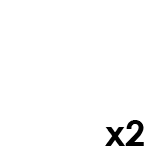
<style>
.page{position:relative;width:150px;height:150px;background:#ffffff}
.page>*{position:absolute;margin:0}
.t1{font:36px "CenturyGothic-Bold";color:#000000}
</style>
<div class="page">
<p class="t1" style="left:105px;top:120px;width:39px;height:26px">x2</p>
</div>
